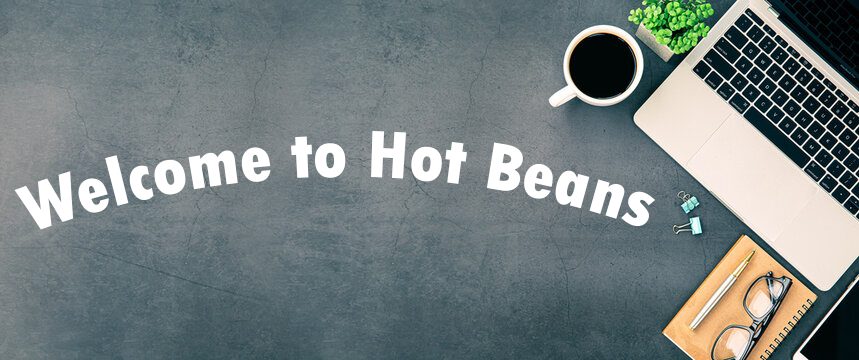
<style>
.page{position:relative;width:859px;height:360px}
.page>*{position:absolute;margin:0}
.t1{font:71.3px "TwCenMT-CondensedExtraBold";color:#ffffff}
.t2{font:71.3px "TwCenMT-CondensedExtraBold";color:#000000}
</style>
<div class="page">
<p class="t1" style="left:14px;top:131px;width:641px;height:99px">Welcome to Hot Beans <span class="t2">Web</span></p>
</div>
